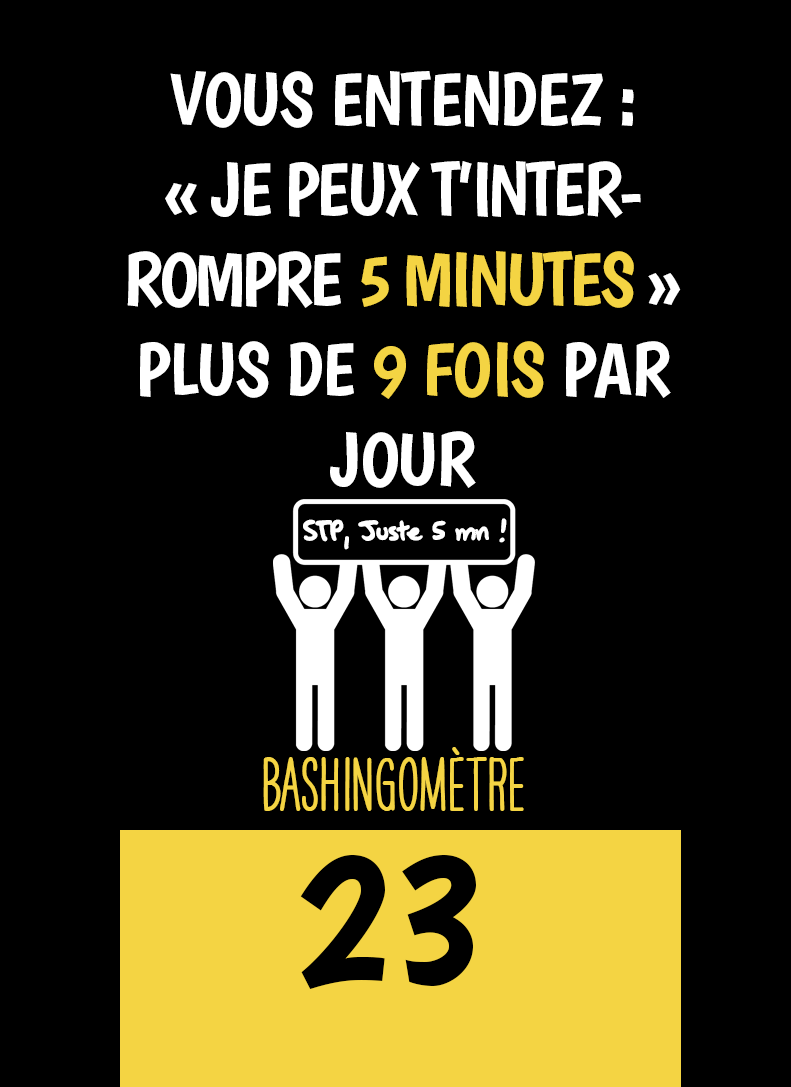
<style>
.page{position:relative;width:791px;height:1087px;background:#000000}
.page>*{position:absolute;margin:0}
.t1{font:75px "Boogaloo-Regular";letter-spacing:-0.04em;color:#ffffff}
.t2{font:75px "Boogaloo-Regular";letter-spacing:-0.02em;color:#ffffff}
.t3{font:75px "Boogaloo-Regular";letter-spacing:-0.04em;color:#f4d443}
.t4{font:75px "Boogaloo-Regular";letter-spacing:-0.02em;color:#f4d443}
.t5{font:33.3px "OakStreetW01-Regular";letter-spacing:-0.04em;color:#ffffff}
.t6{font:66.7px "HAVEANICEDAYTallW04-Bold";color:#f4d443}
.t7{font:200px "Boogaloo-Regular";color:#000000}
</style>
<div class="page">
<p class="t1" style="left:127px;top:71px;width:554px;height:417px;text-align:center"><span class="t2">VOUS ENTENDEZ :<br></span>« JE PEUX T’INTERROMPRE <span class="t3">5 MINUTES</span> » <span class="t2">PLUS DE </span><span class="t4">9 FOIS</span><span class="t2"> PAR JOUR</span></p>
<p class="t5" style="left:303px;top:518px;width:204px;height:32px">STP, Juste 5 mn !</p>
<p class="t6" style="left:263px;top:747px;width:261px;height:64px">BASHINgomètre</p>
<p class="t7" style="left:300px;top:855px;width:176px;height:134px">23</p>
</div>
